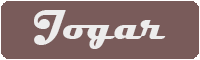
<style>
.page{position:relative;width:200px;height:60px;background:#795b5a}
.page>*{position:absolute;margin:0}
.t1{font:41.7px "Magneto-Bold";color:#edecec}
</style>
<div class="page">
<p class="t1" style="left:34px;top:10px;width:132px;height:39px">Jogar</p>
</div>
